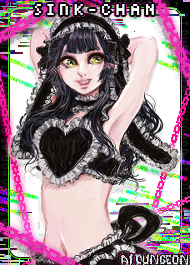
<style>
.page{position:relative;width:190px;height:265px}
.page>*{position:absolute;margin:0}
.t1{font:22.2px "Petiote";letter-spacing:0.105em;color:#ffffff;scale:0.86 1}
</style>
<div class="page">
<p class="t1" style="left:35px;top:4px;width:119px;height:11px">Sink-CHAN</p>
</div>
